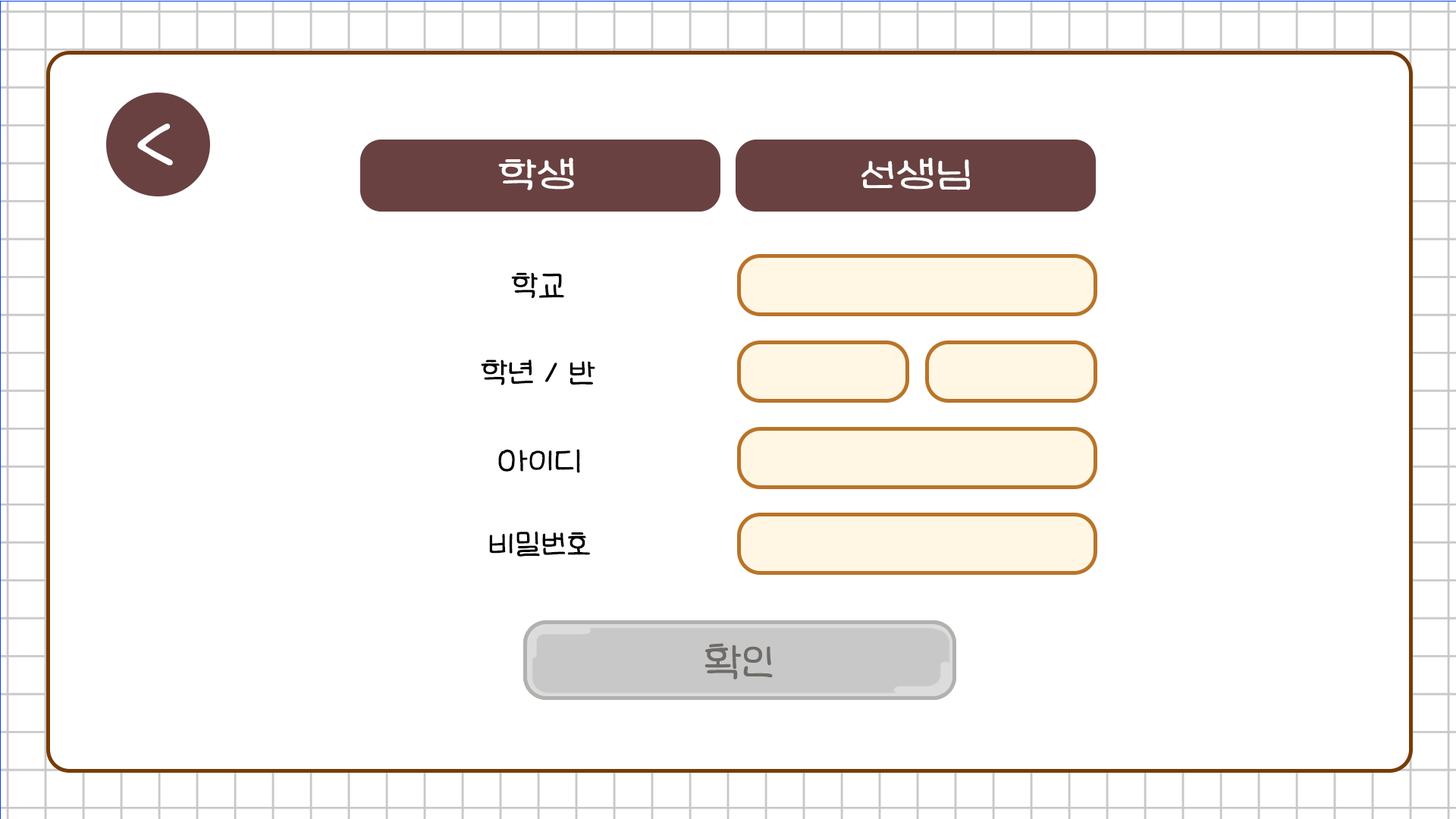
<style>
.page{position:relative;width:1456px;height:819px;background:#ffffff}
.page>*{position:absolute;margin:0}
.t1{font:75.8px "LeeSeoyun";color:#ffffff}
.t2{font:42px "LeeSeoyun";color:#ffffff;scale:1.19 1}
.t3{font:34.6px "LeeSeoyun";color:#000000}
.t4{font:45.5px "LeeSeoyun";color:#6f6b67}
</style>
<div class="page">
<p class="t1" style="left:137px;top:124px;width:36px;height:41px">&lt;</p>
<p class="t2" style="left:498px;top:158px;width:76px;height:32px">학생</p>
<p class="t2" style="left:498px;top:158px;width:76px;height:32px">학생</p>
<p class="t2" style="left:861px;top:158px;width:109px;height:32px">선생님</p>
<p class="t2" style="left:861px;top:158px;width:109px;height:32px">선생님</p>
<p class="t3" style="left:511px;top:272px;width:53px;height:26px">학교</p>
<p class="t3" style="left:481px;top:359px;width:114px;height:26px">학년 / 반</p>
<p class="t3" style="left:498px;top:449px;width:82px;height:24px">아이디</p>
<p class="t3" style="left:489px;top:531px;width:101px;height:26px">비밀번호</p>
<p class="t4" style="left:704px;top:643px;width:69px;height:36px">확인</p>
<p class="t4" style="left:704px;top:643px;width:69px;height:36px">확인</p>
</div>
